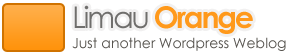
<style>
.page{position:relative;width:301px;height:56px;background:#ffffff}
.page>*{position:absolute;margin:0}
.t1{font:30px "CenturyGothic-Bold";letter-spacing:-0.075em;color:#ff991b}
.t2{font:30px "CenturyGothic";letter-spacing:-0.075em;color:#6f6e6c}
.t3{font:14px "CenturyGothic";color:#57544f}
</style>
<div class="page">
<p class="t1" style="left:74px;top:5px;width:179px;height:29px"><span class="t2">Limau </span>Orange</p>
<p class="t3" style="left:72px;top:37px;width:214px;height:14px">Just another Wordpress Weblog</p>
</div>
